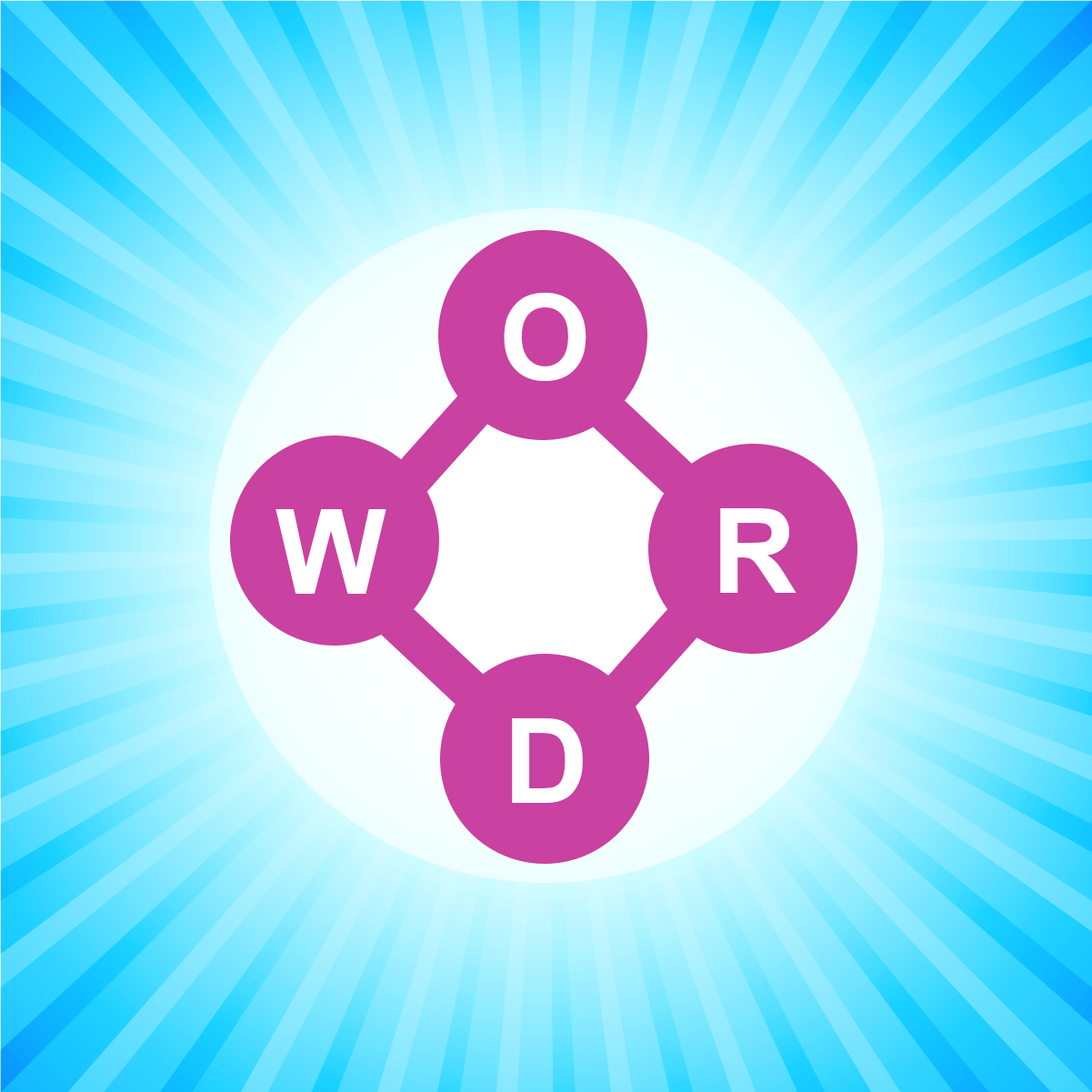
<style>
.page{position:relative;width:1092px;height:1092px}
.page>*{position:absolute;margin:0}
.t1{font:117px "Arial-BoldMT";color:#ffffff}
</style>
<div class="page">
<p class="t1" style="left:504px;top:293px;width:82px;height:88px">O</p>
<p class="t1" style="left:275px;top:509px;width:111px;height:85px">Wt</p>
<p class="t1" style="left:720px;top:508px;width:76px;height:85px">R</p>
<p class="t1" style="left:512px;top:718px;width:71px;height:85px">D</p>
</div>
